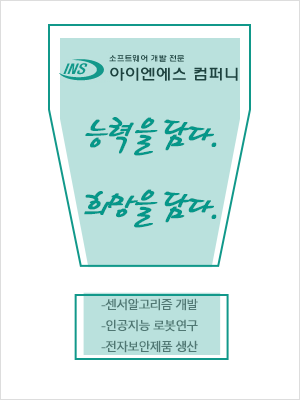
<style>
.page{position:relative;width:300px;height:400px;background:#ffffff}
.page>*{position:absolute;margin:0}
.t1{font:41.2px "HaanCjaB";letter-spacing:-0.1em;color:#009688;font-weight:bold}
.t2{font:12px "MalgunGothic";letter-spacing:-0.1em;color:#507773;font-weight:bold}
</style>
<div class="page">
<p class="t1" style="left:84px;top:117px;width:133px;height:111px">능력을 담다.<br>희망을 담다.</p>
<p class="t2" style="left:101px;top:298px;width:97px;height:55px">-센서알고리즘 개발<br>-인공지능 로봇연구<br>-전자보안제품 생산</p>
</div>
